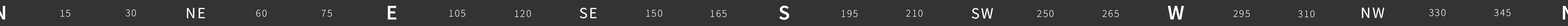
<style>
.page{position:relative;width:1568px;height:26px;background:#333333}
.page>*{position:absolute;margin:0}
.t1{font:20.9px "SourceSansRoman-Semibold";letter-spacing:0.1em;color:#ffffff;text-transform:uppercase}
.t2{font:10.5px "SourceSansRoman-Light";letter-spacing:0.1em;color:#ffffff;text-transform:uppercase}
.t3{font:15.7px "SourceSansRoman-Regular";letter-spacing:0.1em;color:#ffffff;text-transform:uppercase}
</style>
<div class="page">
<p class="t1" style="left:388px;top:6px;width:9px;height:14px">E</p>
<p class="t1" style="left:779px;top:6px;width:10px;height:14px">S</p>
<p class="t1" style="left:1168px;top:6px;width:16px;height:14px">W</p>
<p class="t2" style="left:60px;top:10px;width:10px;height:7px">15</p>
<p class="t2" style="left:125px;top:9px;width:11px;height:8px">30</p>
<p class="t3" style="left:187px;top:8px;width:18px;height:11px">NE</p>
<p class="t2" style="left:256px;top:10px;width:11px;height:7px">60</p>
<p class="t2" style="left:321px;top:10px;width:11px;height:7px">75</p>
<p class="t2" style="left:449px;top:10px;width:16px;height:7px">105</p>
<p class="t2" style="left:515px;top:10px;width:16px;height:7px">120</p>
<p class="t3" style="left:580px;top:8px;width:17px;height:11px">SE</p>
<p class="t2" style="left:646px;top:10px;width:16px;height:7px">150</p>
<p class="t2" style="left:710px;top:10px;width:17px;height:7px">165</p>
<p class="t2" style="left:841px;top:10px;width:17px;height:7px">195</p>
<p class="t2" style="left:906px;top:10px;width:17px;height:7px">210</p>
<p class="t3" style="left:972px;top:8px;width:21px;height:11px">SW</p>
<p class="t2" style="left:1037px;top:10px;width:17px;height:7px">250</p>
<p class="t2" style="left:1102px;top:10px;width:17px;height:7px">265</p>
<p class="t2" style="left:1233px;top:10px;width:17px;height:7px">295</p>
<p class="t2" style="left:1298px;top:10px;width:17px;height:8px">310</p>
<p class="t3" style="left:1362px;top:8px;width:22px;height:10px">NW</p>
<p class="t2" style="left:1429px;top:9px;width:17px;height:7px">330</p>
<p class="t2" style="left:1494px;top:9px;width:17px;height:7px">345</p>
</div>
